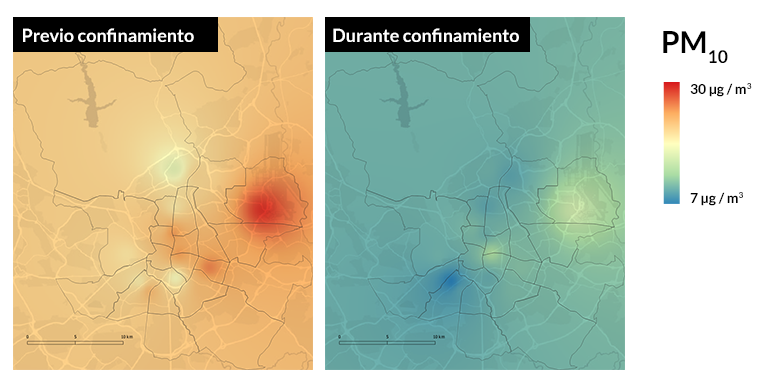
<style>
.page{position:relative;width:780px;height:380px;background:#ffffff}
.page>*{position:absolute;margin:0}
.t1{font:18px "Lato-Bold";color:#ffffff}
.t2{font:30px "Lato-Bold";color:#000000}
.t3{font:14px "Lato-Bold";color:#000000}
</style>
<div class="page">
<p class="t1" style="left:23px;top:28px;width:171px;height:14px">Previo confinamiento</p>
<p class="t1" style="left:333px;top:28px;width:186px;height:14px">Durante confinamiento</p>
<p class="t2" style="left:663px;top:31px;width:65px;height:32px">PM10</p>
<p class="t3" style="left:690px;top:83px;width:62px;height:14px">30 μg / m3</p>
<p class="t3" style="left:690px;top:192px;width:53px;height:14px">7 μg / m3</p>
</div>
